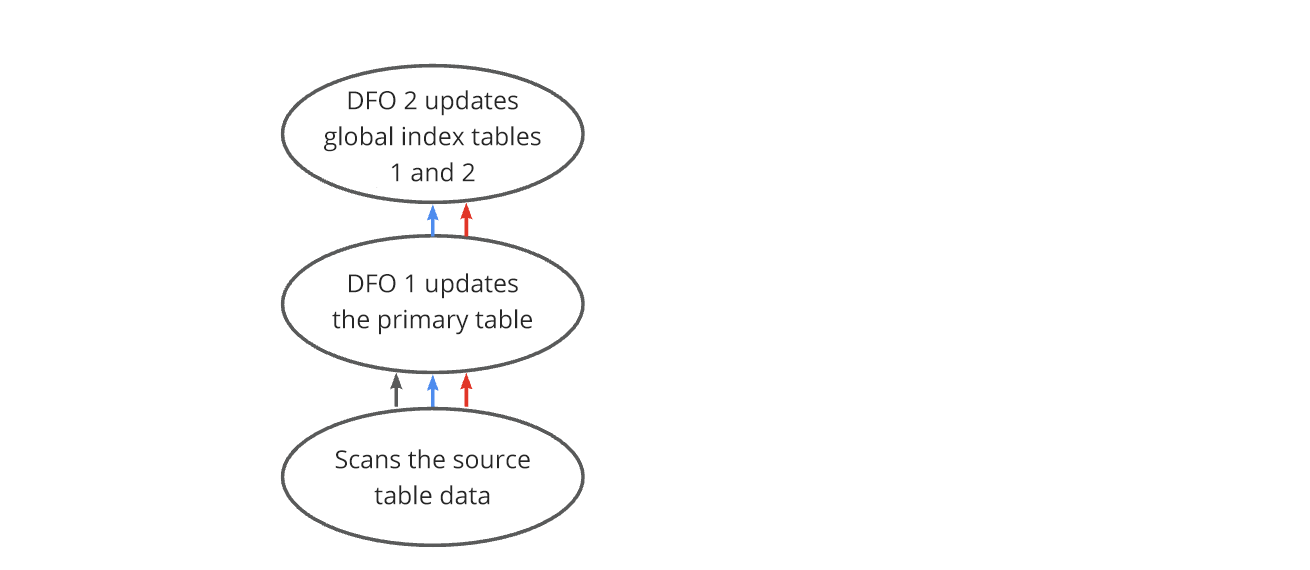
<style>
.page{position:relative;width:1310px;height:570px;background:#ffffff}
.page>*{position:absolute;margin:0}
.t1{font:25px/36px "OpenSans";color:#262626}
</style>
<div class="page">
<p class="t1" style="left:324px;top:90px;width:217px;height:92px;text-align:center">DFO 2 updates global index tables 1 and 2</p>
<p class="t1" style="left:332px;top:273px;width:200px;height:62px;text-align:center">DFO 1 updates the primary table</p>
<p class="t1" style="left:335px;top:449px;width:195px;height:56px;text-align:center">Scans the source table data</p>
</div>
